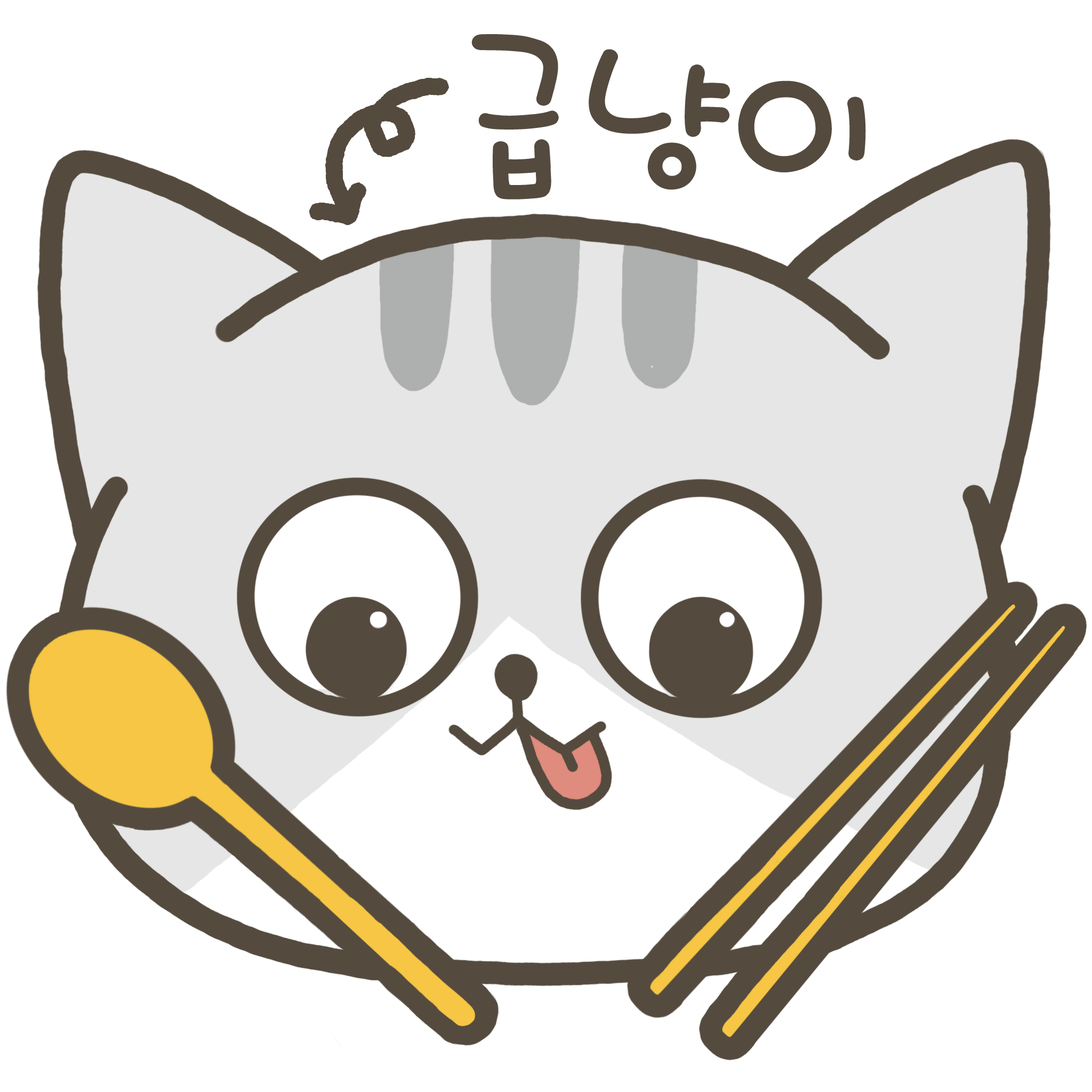
<style>
.page{position:relative;width:1092px;height:1092px;background:#ffffff}
.page>*{position:absolute;margin:0}
.t1{font:195.5px "RixCatfarmM";letter-spacing:-0.01em;color:#544a3e}
.t2{font:195.5px "RixCatfarmM";letter-spacing:-0.1em;color:#544a3e}
</style>
<div class="page">
<p class="t1" style="left:473px;top:36px;width:391px;height:162px"><span class="t2">급</span>냥이</p>
</div>
